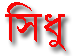
<style>
.page{position:relative;width:77px;height:56px;background:#ffffff}
.page>*{position:absolute;margin:0}
.t1{font:50.2px "SolaimanLipiNormal";color:#f80606}
</style>
<div class="page">
<p class="t1" style="left:5px;top:2px;width:61px;height:49px">সিধু</p>
</div>
